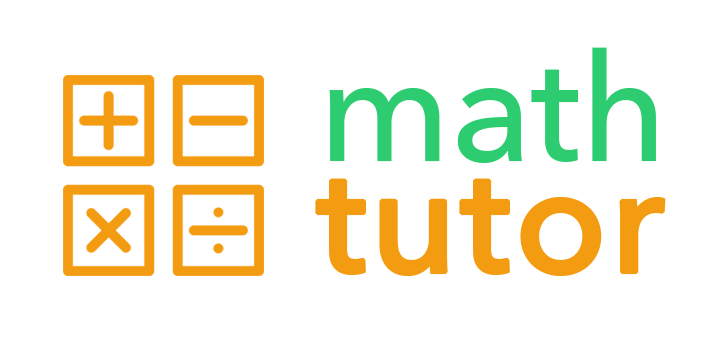
<style>
.page{position:relative;width:718px;height:350px;background:#ffffff}
.page>*{position:absolute;margin:0}
.t1{font:150px/111px "AvenirNext-Medium";color:#f39c12;font-weight:bold}
.t2{font:150px/111px "AvenirNext-Medium";color:#2ecc71}
</style>
<div class="page">
<p class="t1" style="left:315px;top:47px;width:351px;height:230px;text-align:center"><span class="t2">math<br></span>tutor</p>
</div>
